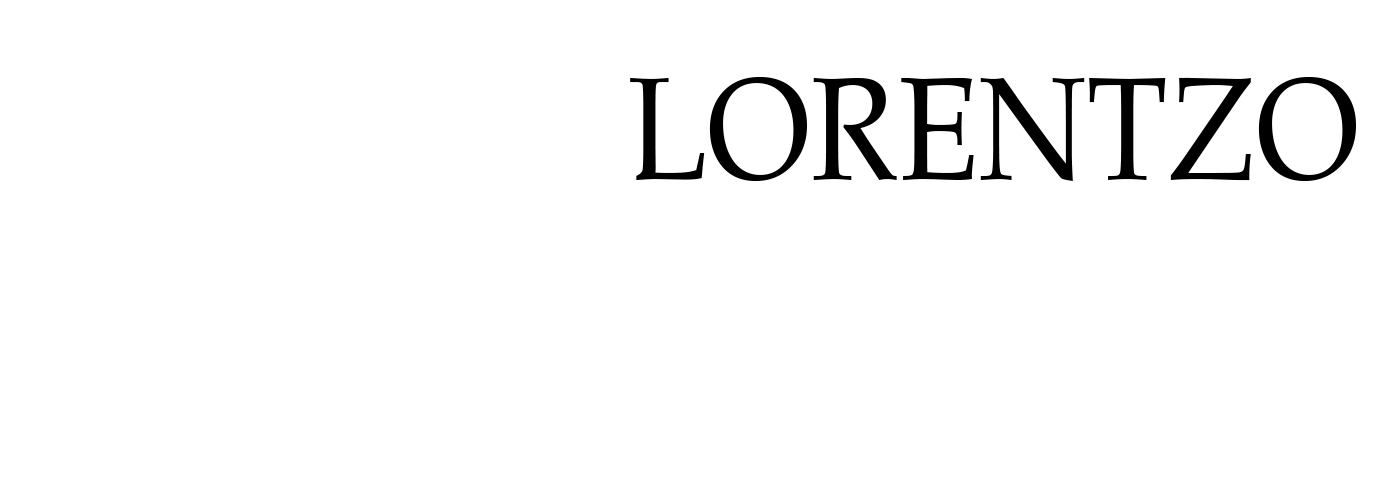
<style>
.page{position:relative;width:1400px;height:488px;background:#ffffff}
.page>*{position:absolute;margin:0}
.t1{font:146px "BookAntiqua";color:#000000;scale:0.9 1}
</style>
<div class="page">
<p class="t1" style="left:630px;top:77px;width:726px;height:104px">LORENTZO</p>
</div>
